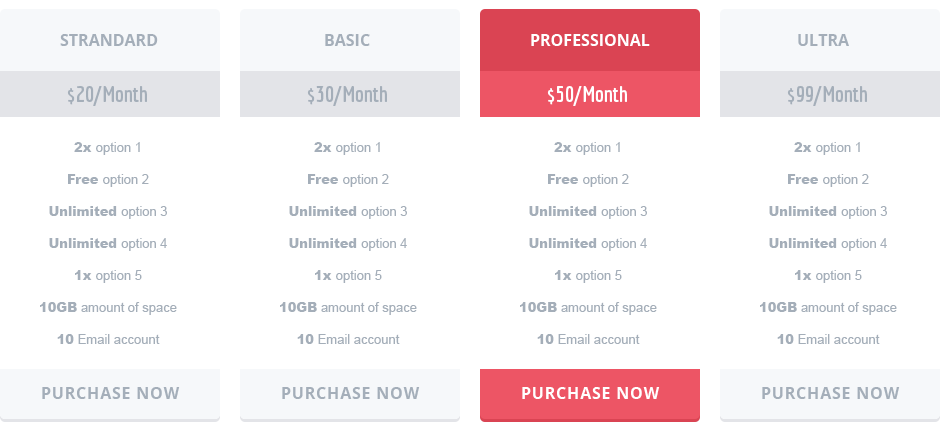
<style>
.page{position:relative;width:940px;height:432px;background:#ffffff}
.page>*{position:absolute;margin:0}
.t1{font:16px "OpenSans-Bold";color:#a4aeb9;text-transform:uppercase}
.t2{font:16px "OpenSans-Bold";color:#ffffff;text-transform:uppercase}
.t3{font:22px "Economica-Bold";color:#a4aeb9}
.t4{font:22px "Economica-Bold";color:#ffffff}
.t5{font:13px/32px "ArialMT";color:#a4aeb9}
.t6{font:13px/32px "Arial-Black";color:#a4aeb9}
.t7{font:16px "OpenSans-Bold";letter-spacing:0.05em;color:#a4aeb9;text-transform:uppercase}
.t8{font:16px "OpenSans-Bold";letter-spacing:0.05em;color:#ffffff;text-transform:uppercase}
</style>
<div class="page">
<p class="t1" style="left:60px;top:34px;width:98px;height:12px">Strandard</p>
<p class="t1" style="left:325px;top:34px;width:45px;height:12px">BASIC</p>
<p class="t2" style="left:531px;top:34px;width:119px;height:12px">professional</p>
<p class="t1" style="left:798px;top:34px;width:51px;height:12px">ULTRA</p>
<p class="t3" style="left:67px;top:86px;width:80px;height:20px">$20/Month</p>
<p class="t3" style="left:307px;top:86px;width:80px;height:20px">$30/Month</p>
<p class="t4" style="left:547px;top:86px;width:80px;height:20px">$50/Month</p>
<p class="t3" style="left:787px;top:86px;width:80px;height:20px">$99/Month</p>
<p class="t5" style="left:40px;top:142px;width:137px;height:202px;text-align:center"><span class="t6">2x </span>option 1<br><span class="t6">Free </span>option 2<br><span class="t6">Unlimited </span>option 3<br><span class="t6">Unlimited </span>option 4<br><span class="t6">1x </span>option 5<br><span class="t6">10GB</span> amount of space<br><span class="t6">10</span> Email account</p>
<p class="t5" style="left:280px;top:142px;width:137px;height:202px;text-align:center"><span class="t6">2x </span>option 1<br><span class="t6">Free </span>option 2<br><span class="t6">Unlimited </span>option 3<br><span class="t6">Unlimited </span>option 4<br><span class="t6">1x </span>option 5<br><span class="t6">10GB</span> amount of space<br><span class="t6">10</span> Email account</p>
<p class="t5" style="left:520px;top:142px;width:137px;height:202px;text-align:center"><span class="t6">2x </span>option 1<br><span class="t6">Free </span>option 2<br><span class="t6">Unlimited </span>option 3<br><span class="t6">Unlimited </span>option 4<br><span class="t6">1x </span>option 5<br><span class="t6">10GB</span> amount of space<br><span class="t6">10</span> Email account</p>
<p class="t5" style="left:760px;top:142px;width:137px;height:202px;text-align:center"><span class="t6">2x </span>option 1<br><span class="t6">Free </span>option 2<br><span class="t6">Unlimited </span>option 3<br><span class="t6">Unlimited </span>option 4<br><span class="t6">1x </span>option 5<br><span class="t6">10GB</span> amount of space<br><span class="t6">10</span> Email account</p>
<p class="t7" style="left:42px;top:387px;width:138px;height:12px">PURCHASE Now</p>
<p class="t7" style="left:282px;top:387px;width:138px;height:12px">PURCHASE Now</p>
<p class="t8" style="left:522px;top:387px;width:138px;height:12px">PURCHASE Now</p>
<p class="t7" style="left:762px;top:387px;width:138px;height:12px">PURCHASE Now</p>
</div>
